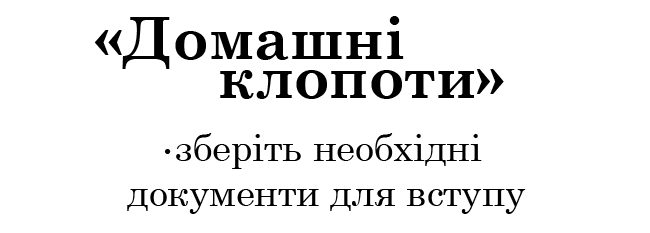
<style>
.page{position:relative;width:650px;height:233px;background:#ffffff}
.page>*{position:absolute;margin:0}
.t1{font:58.3px "CenturySchoolbook-Bold";color:#000000}
.t2{font:37.5px "CenturySchoolbook";color:#000000}
.t3{font:25px "CenturySchoolbook";color:#000000}
</style>
<div class="page">
<p class="t1" style="left:94px;top:16px;width:310px;height:53px">«Домашні</p>
<p class="t1" style="left:220px;top:69px;width:284px;height:30px">клопоти»</p>
<p class="t2" style="left:127px;top:133px;width:399px;height:81px;text-align:center"><span class="t3">•</span>зберіть необхідні <br>документи для вступу</p>
</div>
